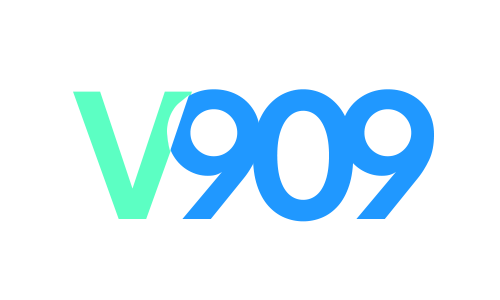
<style>
.page{position:relative;width:500px;height:300px;background:#ffffff}
.page>*{position:absolute;margin:0}
.t1{font:193px "LeagueSpartan-SemiBold";letter-spacing:-0.04em;color:#2099ff}
.t2{font:193px "LeagueSpartan-SemiBold";letter-spacing:-0.04em;color:#5cffc4}
</style>
<div class="page">
<p class="t1" style="left:167px;top:89px;width:93px;height:130px">9</p>
<p class="t1" style="left:253px;top:89px;width:101px;height:133px">0</p>
<p class="t1" style="left:341px;top:89px;width:93px;height:130px">9</p>
<p class="t2" style="left:73px;top:91px;width:119px;height:128px">V</p>
</div>
